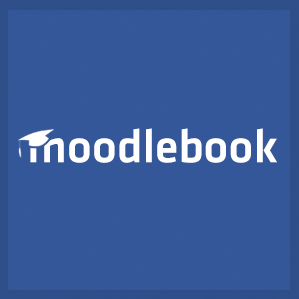
<style>
.page{position:relative;width:299px;height:299px;background:#345799}
.page>*{position:absolute;margin:0}
.t1{font:48px "Klavika-Medium";color:#ffffff}
</style>
<div class="page">
<p class="t1" style="left:30px;top:128px;width:247px;height:35px">moodlebook</p>
</div>
